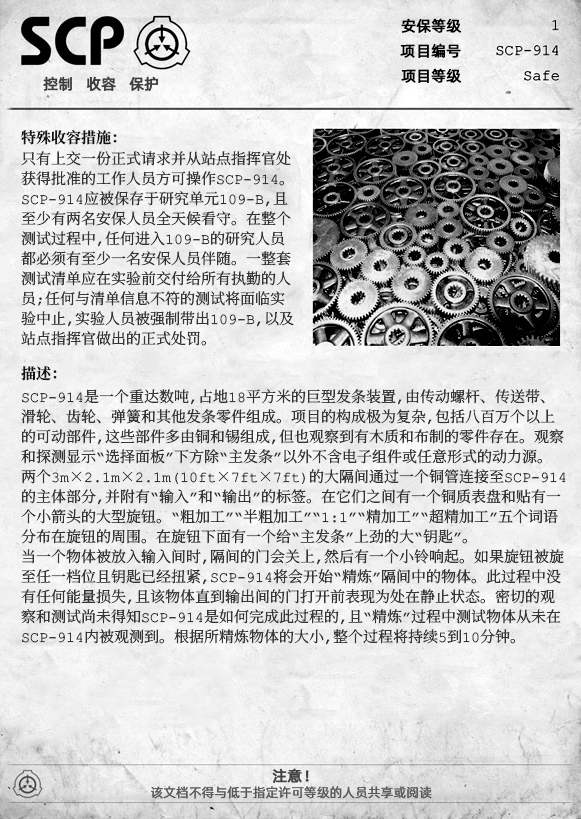
<style>
.page{position:relative;width:581px;height:819px}
.page>*{position:absolute;margin:0}
.t1{font:15px "AlibabaPuHuiTiR";color:#000000;font-weight:bold}
.t2{font:15px "AlibabaPuHuiTiR";color:#3d3d3d;font-weight:bold}
.t3{font:15px "ContainmentBreach-Bold";color:#121212}
.t4{font:15px/20px "ContainmentBreach-Regular";color:#353535}
.t5{font:15px "AlibabaPuHuiTiR";color:#414141;font-weight:bold}
.t6{font:13px "AlibabaPuHuiTiR";color:#575757}
</style>
<div class="page">
<p class="t1" style="left:401px;top:18px;width:61px;height:15px">安保等级</p>
<p class="t1" style="left:400px;top:43px;width:61px;height:15px">项目编号</p>
<p class="t2" style="left:43px;top:76px;width:115px;height:15px">控制   收容   保护</p>
<p class="t1" style="left:401px;top:68px;width:61px;height:15px">项目等级</p>
<p class="t3" style="left:21px;top:130px;width:96px;height:15px">特殊收容措施：</p>
<p class="t4" style="left:21px;top:151px;width:273px;height:195px">只有上交一份正式请求并从站点指挥官处<br>获得批准的工作人员方可操作SCP-914。<br>SCP-914应被保存于研究单元109-B，且<br>至少有两名安保人员全天候看守。在整个<br>测试过程中，任何进入109-B的研究人员<br>都必须有至少一名安保人员伴随。一整套<br>测试清单应在实验前交付给所有执勤的人<br>员；任何与清单信息不符的测试将面临实<br>验中止，实验人员被强制带出109-B，以及<br>站点指挥官做出的正式处罚。</p>
<p class="t3" style="left:21px;top:366px;width:36px;height:15px">描述：</p>
<p class="t4" style="left:21px;top:389px;width:545px;height:256px">SCP-914是一个重达数吨，占地18平方米的巨型发条装置，由传动螺杆、传送带、<br>滑轮、齿轮、弹簧和其他发条零件组成。项目的构成极为复杂，包括八百万个以上<br>的可动部件，这些部件多由铜和锡组成，但也观察到有木质和布制的零件存在。观察<br>和探测显示“选择面板”下方除“主发条”以外不含电子组件或任意形式的动力源。<br>两个3m×2.1m×2.1m（10ft×7ft×7ft）的大隔间通过一个铜管连接至SCP-914<br>的主体部分，并附有“输入”和“输出”的标签。在它们之间有一个铜质表盘和贴有一<br>个小箭头的大型旋钮。“粗加工”“半粗加工”“1:1”“精加工”“超精加工”五个词语<br>分布在旋钮的周围。在旋钮下面有一个给“主发条”上劲的大“钥匙”。<br>当一个物体被放入输入间时，隔间的门会关上，然后有一个小铃响起。如果旋钮被旋<br>至任一档位且钥匙已经扭紧，SCP-914将会开始“精炼”隔间中的物体。此过程中没<br>有任何能量损失，且该物体直到输出间的门打开前表现为处在静止状态。密切的观<br>察和测试尚未得知SCP-914是如何完成此过程的，且“精炼”过程中测试物体从未在<br>SCP-914内被观测到。根据所精炼物体的大小，整个过程将持续5到10分钟。</p>
<p class="t5" style="left:272px;top:768px;width:37px;height:15px">注意！</p>
<p class="t6" style="left:151px;top:786px;width:281px;height:13px">该文档不得与低于指定许可等级的人员共享或阅读</p>
</div>
